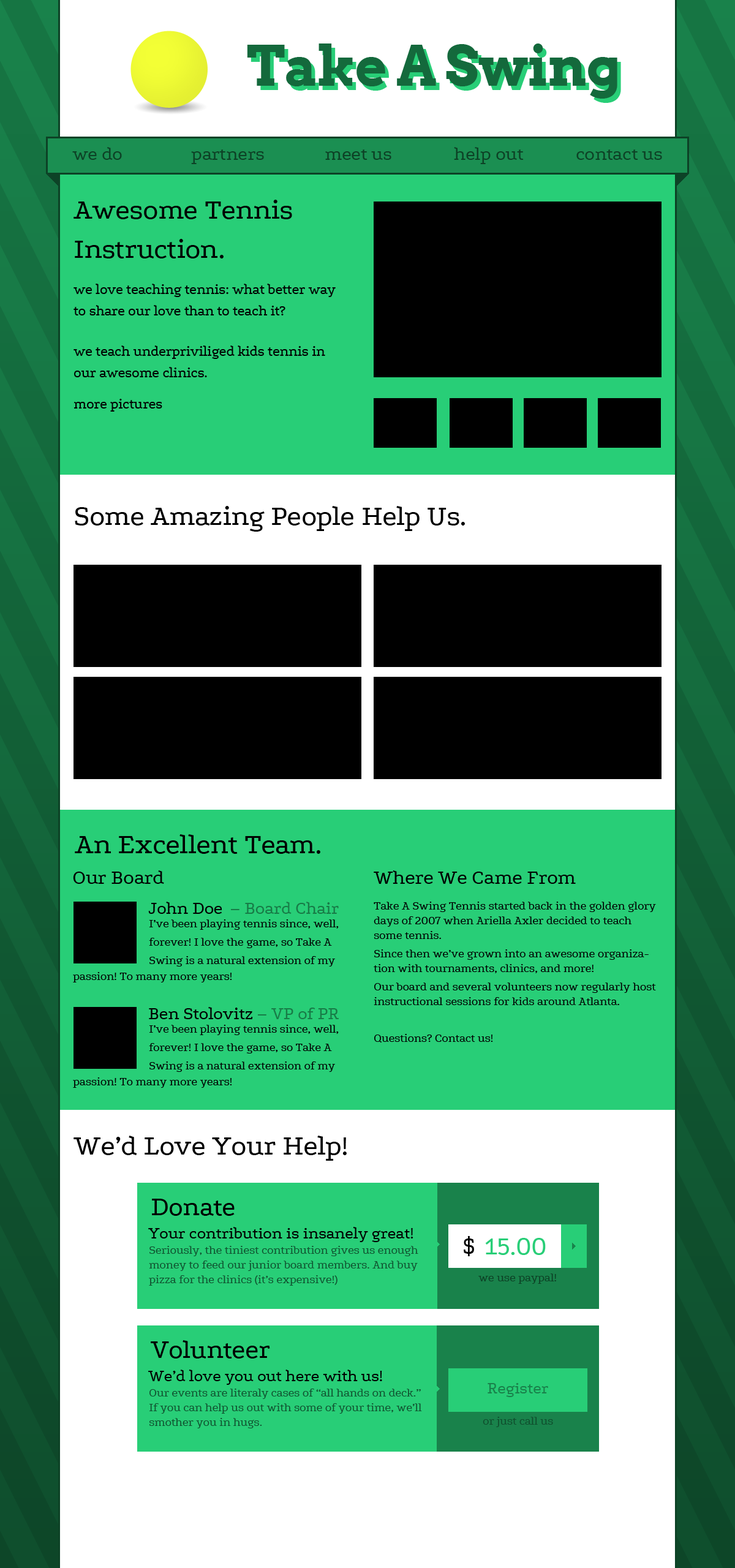
<style>
.page{position:relative;width:735px;height:1568px;background:#ffffff}
.page>*{position:absolute;margin:0}
.t1{font:55.1px "Arvo-Bold";letter-spacing:-0.02em;color:#14683c}
.t2{font:55.1px "Arvo-Bold";letter-spacing:-0.02em}
.t3{font:19.6px "Podkova";letter-spacing:-0.02em;color:#0d4226}
.t4{font:29.4px "Podkova";letter-spacing:-0.02em;color:#000000}
.t5{font:14.7px "Podkova";letter-spacing:-0.02em;color:#000000}
.t6{font:20.8px "Podkova";letter-spacing:-0.02em;color:#000000}
.t7{font:18.4px "Podkova";letter-spacing:-0.02em;color:#000000}
.t8{font:18.4px "Podkova";letter-spacing:-0.02em;color:#187c47}
.t9{font:12.2px "Podkova";letter-spacing:-0.02em;color:#000000}
.t10{font:27.6px "Podkova";letter-spacing:-0.02em;color:#000000}
.t11{font:17.2px "Podkova";letter-spacing:-0.02em;color:#000000}
.t12{font:27px "Podkova";letter-spacing:-0.02em;color:#000000}
.t13{font:27px "Podkova";letter-spacing:-0.02em;color:#28ce77}
.t14{font:12.2px "Podkova";letter-spacing:-0.02em;color:#105230}
.t15{font:12.2px "Podkova";letter-spacing:-0.02em;color:#0c4125}
.t16{font:17.2px "Podkova";letter-spacing:-0.02em;color:#19824b}
.t17{font:12.2px "Podkova";letter-spacing:-0.02em;color:#0f4e2d}
</style>
<div class="page">
<p class="t1" style="left:247px;top:43px;width:370px;height:56px">Take A Swing</p>
<p class="t2" style="left:251px;top:48px;width:370px;height:55px">Take A Swing</p>
<p class="t3" style="left:72px;top:147px;width:50px;height:13px">we do</p>
<p class="t3" style="left:191px;top:149px;width:73px;height:15px">partners</p>
<p class="t3" style="left:325px;top:149px;width:66px;height:11px">meet us</p>
<p class="t3" style="left:454px;top:147px;width:70px;height:17px">help out</p>
<p class="t3" style="left:576px;top:149px;width:86px;height:11px">contact us</p>
<p class="t4" style="left:74px;top:200px;width:218px;height:58px">Awesome Tennis<br>Instruction.</p>
<p class="t5" style="left:74px;top:284px;width:262px;height:31px">we love teaching tennis: what better way<br>to share our love than to teach it?</p>
<p class="t5" style="left:74px;top:345px;width:251px;height:32px">we teach underpriviliged kids tennis in<br>our awesome clinics.</p>
<p class="t5" style="left:74px;top:399px;width:88px;height:13px">more pictures</p>
<p class="t4" style="left:75px;top:506px;width:390px;height:26px">Some Amazing People Help Us.</p>
<p class="t4" style="left:75px;top:834px;width:245px;height:20px">An Excellent Team.</p>
<p class="t6" style="left:73px;top:870px;width:91px;height:14px">Our Board</p>
<p class="t6" style="left:374px;top:870px;width:202px;height:14px">Where We Came From</p>
<p class="t7" style="left:148px;top:902px;width:74px;height:12px">John Doe</p>
<p class="t8" style="left:231px;top:902px;width:108px;height:12px">– Board Chair</p>
<p class="t9" style="left:374px;top:902px;width:282px;height:141px">Take A Swing Tennis started back in the golden glory days of 2007 when Ariella Axler decided to teach some tennis. <br>Since then we’ve grown into an awesome organization with tournaments, clinics, and more!<br>Our board and several volunteers now regularly host instructional sessions for kids around Atlanta.<br><br>Questions? Contact us!</p>
<p class="t9" style="left:149px;top:919px;width:190px;height:48px">I’ve been playing tennis since, well,<br>forever! I love the game, so Take A<br>Swing is a natural extension of my</p>
<p class="t9" style="left:73px;top:972px;width:159px;height:10px">passion! To many more years!</p>
<p class="t7" style="left:149px;top:1007px;width:104px;height:12px">Ben Stolovitz</p>
<p class="t8" style="left:258px;top:1008px;width:81px;height:11px">– VP of PR</p>
<p class="t9" style="left:149px;top:1025px;width:190px;height:47px">I’ve been playing tennis since, well,<br>forever! I love the game, so Take A<br>Swing is a natural extension of my</p>
<p class="t9" style="left:73px;top:1077px;width:159px;height:11px">passion! To many more years!</p>
<p class="t4" style="left:74px;top:1136px;width:273px;height:25px">We’d Love Your Help!</p>
<p class="t10" style="left:152px;top:1199px;width:83px;height:17px">Donate</p>
<p class="t11" style="left:148px;top:1227px;width:265px;height:15px">Your contribution is insanely great!</p>
<p class="t12" style="left:463px;top:1236px;width:11px;height:20px">$</p>
<p class="t13" style="left:485px;top:1238px;width:61px;height:17px">15.00</p>
<p class="t14" style="left:149px;top:1246px;width:269px;height:40px">Seriously, the tiniest contribution gives us enough money to feed our junior board members. And buy pizza for the clinics (it’s expensive!)</p>
<p class="t15" style="left:478px;top:1273px;width:78px;height:11px">we use paypal!</p>
<p class="t10" style="left:151px;top:1340px;width:119px;height:19px">Volunteer</p>
<p class="t11" style="left:148px;top:1370px;width:234px;height:15px">We’d love you out here with us!</p>
<p class="t16" style="left:488px;top:1383px;width:60px;height:14px">Register</p>
<p class="t14" style="left:149px;top:1389px;width:273px;height:39px">Our events are literaly cases of “all hands on deck.” If you can help us out with some of your time, we’ll smother you in hugs.</p>
<p class="t17" style="left:483px;top:1417px;width:70px;height:10px">or just call us</p>
</div>
